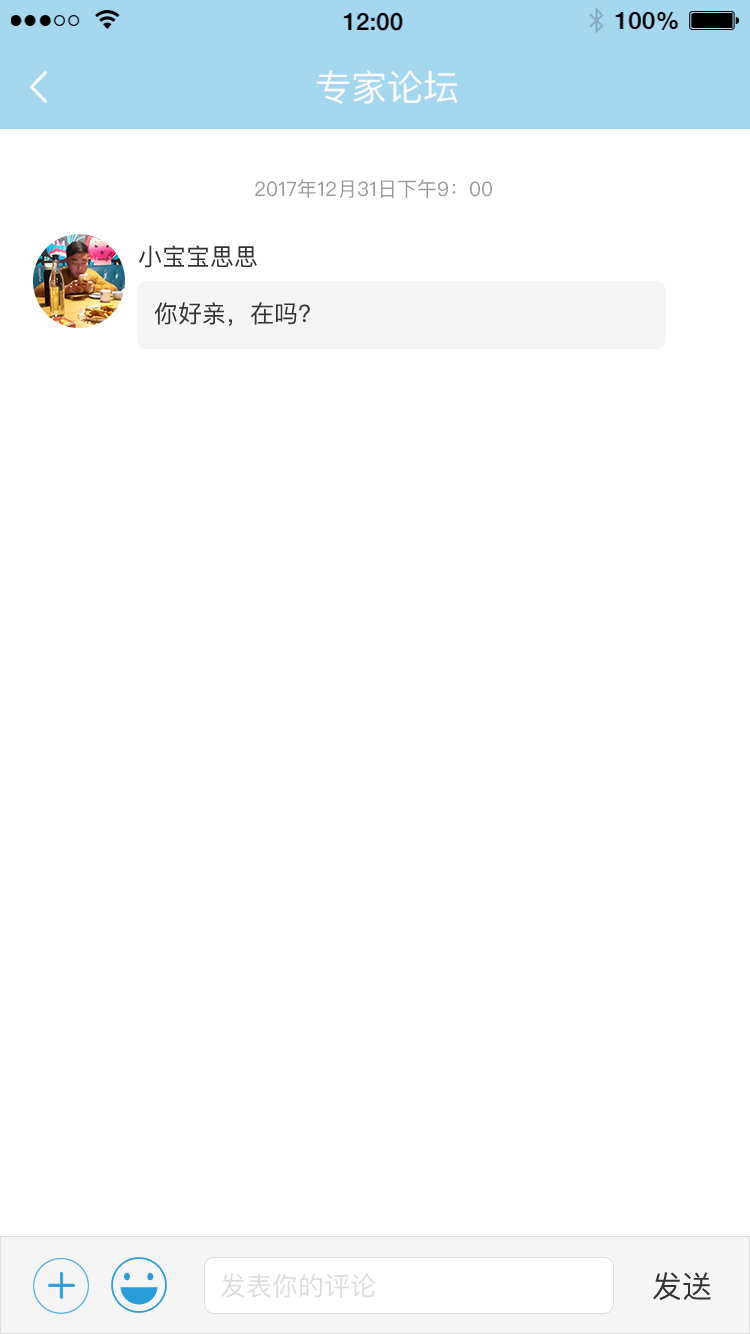
<style>
.page{position:relative;width:750px;height:1334px;background:#ffffff}
.page>*{position:absolute;margin:0}
.t1{font:36px "PingFangSC-Regular";color:#fcfafa}
.t2{font:20px "PingFangSC-Regular";color:#999999}
.t3{font:24px "PingFangSC";color:#333333}
.t4{font:26px "PingFangSC";color:#dddddd}
.t5{font:30px "PingFangSC";color:#333333}
</style>
<div class="page">
<p class="t1" style="left:316px;top:70px;width:142px;height:34px">专家论坛</p>
<p class="t2" style="left:255px;top:179px;width:237px;height:19px">2017年12月31日下午9：00</p>
<p class="t3" style="left:138px;top:245px;width:119px;height:23px">小宝宝思思</p>
<p class="t3" style="left:154px;top:302px;width:156px;height:24px">你好亲，在吗?</p>
<p class="t4" style="left:221px;top:1273px;width:155px;height:25px">发表你的评论</p>
<p class="t5" style="left:653px;top:1272px;width:58px;height:28px">发送</p>
</div>
